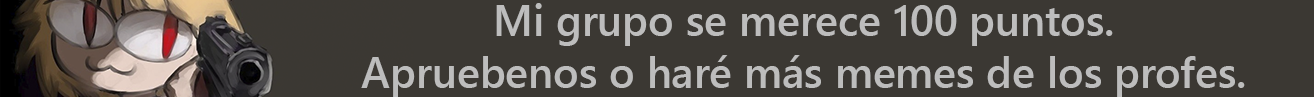
<style>
.page{position:relative;width:1314px;height:97px;background:#3b3833}
.page>*{position:absolute;margin:0}
.t1{font:42.9px "SegoeUI-Semibold";color:#bdbdbd}
</style>
<div class="page">
<p class="t1" style="left:361px;top:3px;width:884px;height:95px;text-align:center">Mi grupo se merece 100 puntos.<br>Apruebenos o haré más memes de los profes.</p>
</div>
